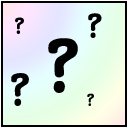
<style>
.page{position:relative;width:128px;height:128px}
.page>*{position:absolute;margin:0}
.t1{font:24px "ChubbyCheeks";color:#000000}
.t2{font:36px "ChubbyCheeks";color:#000000}
.t3{font:80px "ChubbyCheeks";color:#000000}
.t4{font:48px "ChubbyCheeks";color:#000000}
.t5{font:18px "ChubbyCheeks";color:#000000}
</style>
<div class="page">
<p class="t1" style="left:15px;top:17px;width:9px;height:17px">?</p>
<p class="t2" style="left:88px;top:13px;width:14px;height:25px">?</p>
<p class="t3" style="left:48px;top:38px;width:30px;height:55px">?</p>
<p class="t4" style="left:11px;top:73px;width:18px;height:33px">?</p>
<p class="t5" style="left:87px;top:93px;width:7px;height:13px">?</p>
</div>
